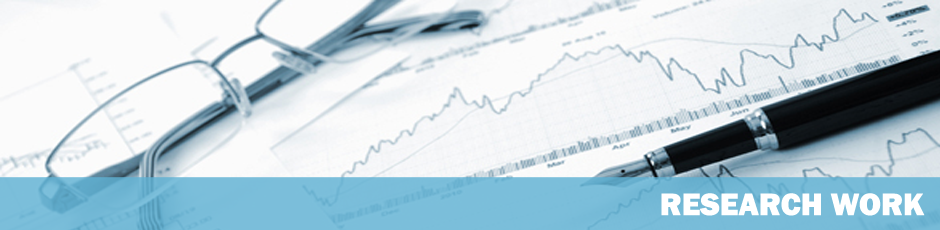
<style>
.page{position:relative;width:940px;height:230px}
.page>*{position:absolute;margin:0}
.t1{font:32px "FranklinGothic-Heavy";color:#ffffff}
</style>
<div class="page">
<p class="t1" style="left:661px;top:193px;width:264px;height:23px">RESEARCH WORK</p>
</div>
